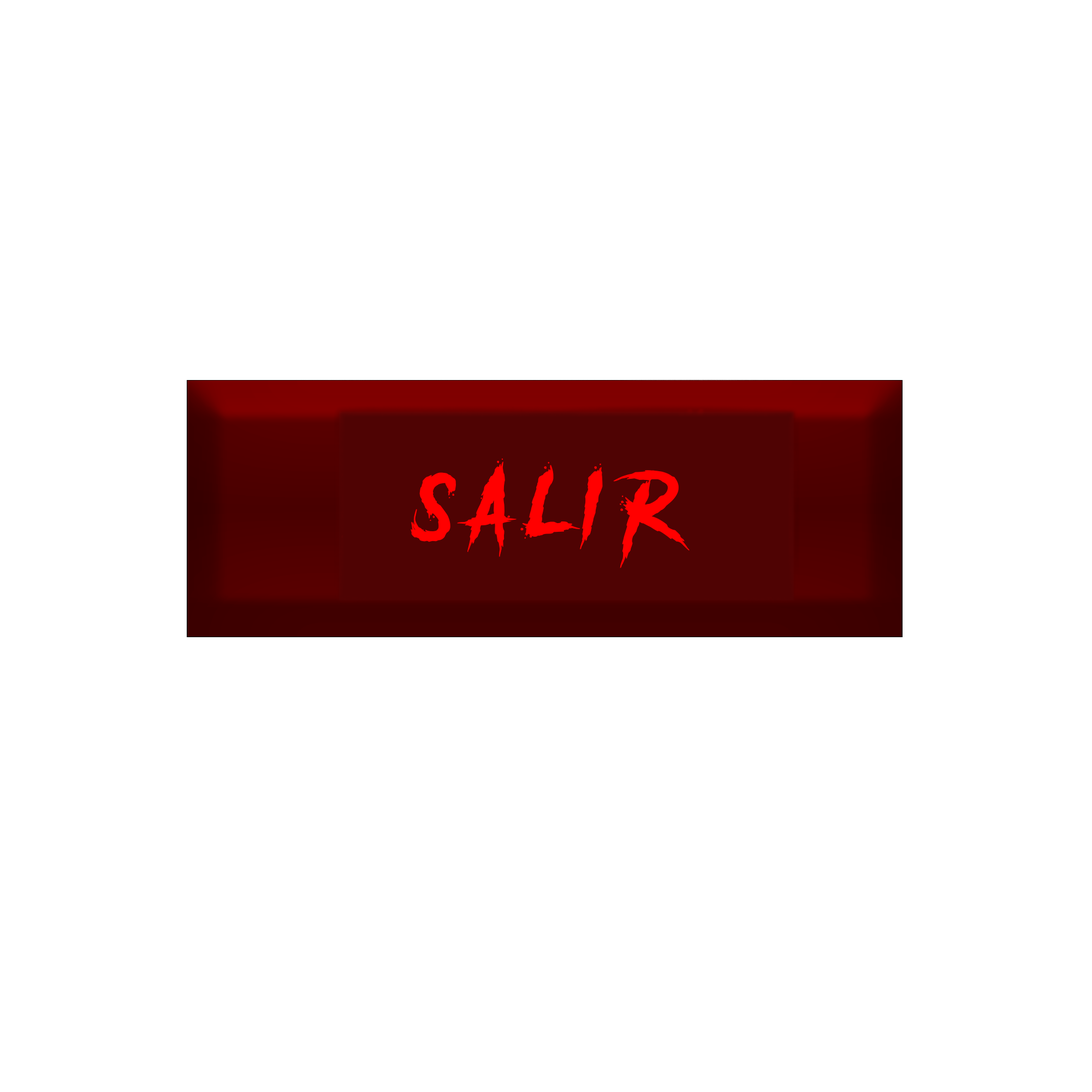
<style>
.page{position:relative;width:1092px;height:1092px;background:#ffffff}
.page>*{position:absolute;margin:0}
.t1{font:81.9px "AnotherDangerDemo";color:#ff0000}
</style>
<div class="page">
<p class="t1" style="left:411px;top:458px;width:279px;height:110px">s a l i r</p>
</div>
